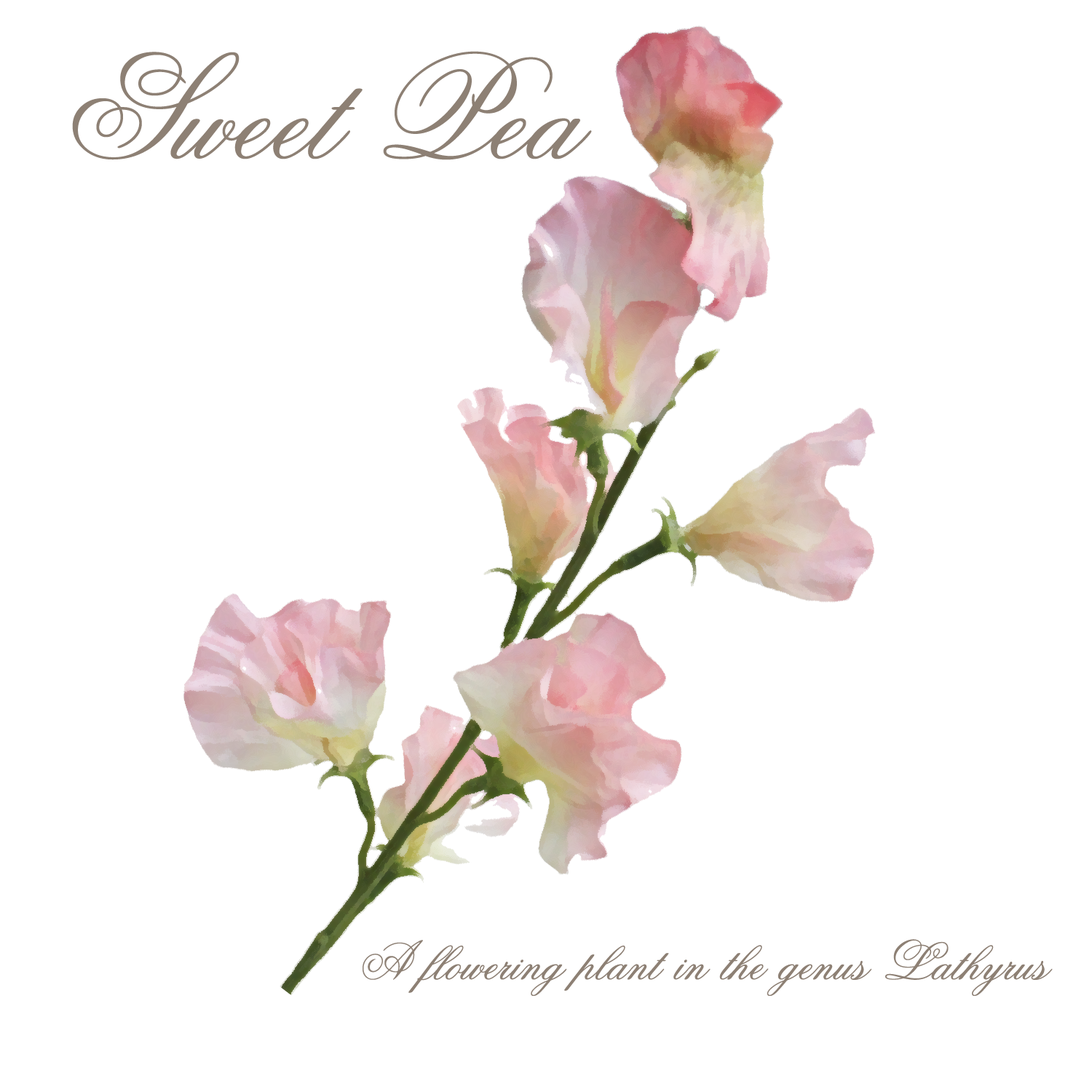
<style>
.page{position:relative;width:1092px;height:1092px;background:#ffffff}
.page>*{position:absolute;margin:0}
.t1{font:145.6px "Old-Scrip";color:#8d8074}
.t2{font:54.6px "Old-Scrip";color:#8d8074}
</style>
<div class="page">
<p class="t1" style="left:72px;top:51px;width:520px;height:109px">Sweet Pea</p>
<p class="t2" style="left:363px;top:939px;width:690px;height:57px">A flowering plant in the genus Lathyrus</p>
</div>
